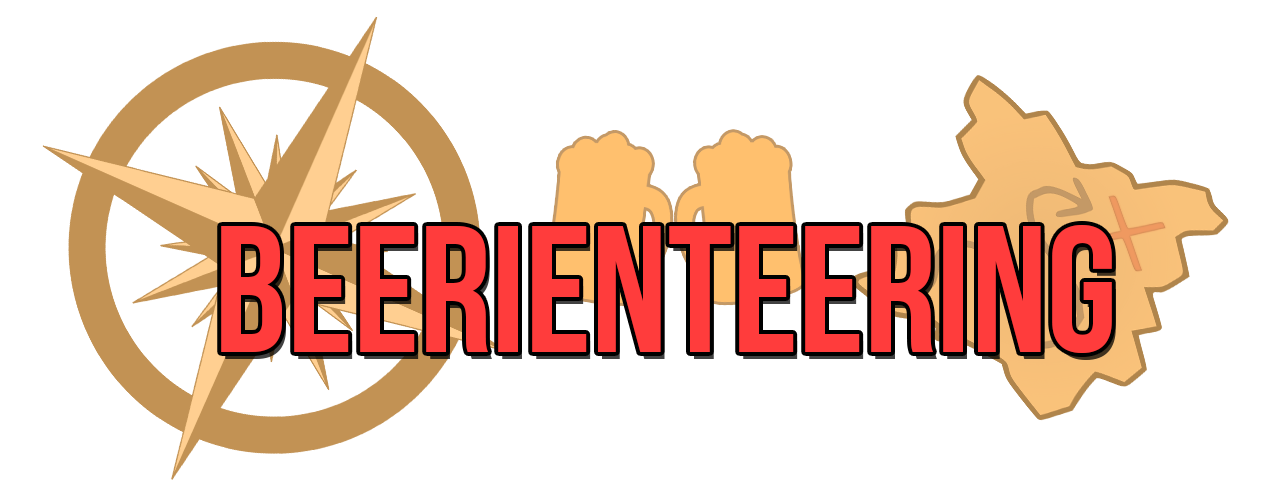
<style>
.page{position:relative;width:1280px;height:500px;background:#ffffff}
.page>*{position:absolute;margin:0}
.t1{font:180px "BebasNeue";color:#ff3c3c}
</style>
<div class="page">
<p class="t1" style="left:221px;top:225px;width:891px;height:128px">Beerienteering</p>
</div>
